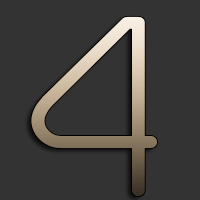
<style>
.page{position:relative;width:200px;height:200px;background:#333333}
.page>*{position:absolute;margin:0}
.t1{font:236.9px "GreyscaleBasic-Regular";scale:1.06 1}
</style>
<div class="page">
<p class="t1" style="left:31px;top:16px;width:126px;height:180px">4</p>
</div>
